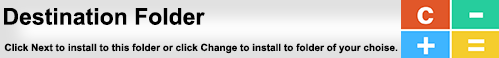
<style>
.page{position:relative;width:499px;height:58px}
.page>*{position:absolute;margin:0}
.t1{font:10px "Arial-BoldMT";color:#000000}
.t2{font:3px "Arial-BoldMT";color:#000000}
.t3{font:23px "Arial-BoldMT";color:#000000}
.t4{font:12px "ArialMT";color:#000000}
</style>
<div class="page">
<p class="t1" style="left:4px;top:8px;width:394px;height:46px"><span class="t2"> </span><span class="t3">Destination Folder<br></span><span class="t4"><br></span> Click Next to install to this folder or click Change to install to folder of your choise.</p>
</div>
